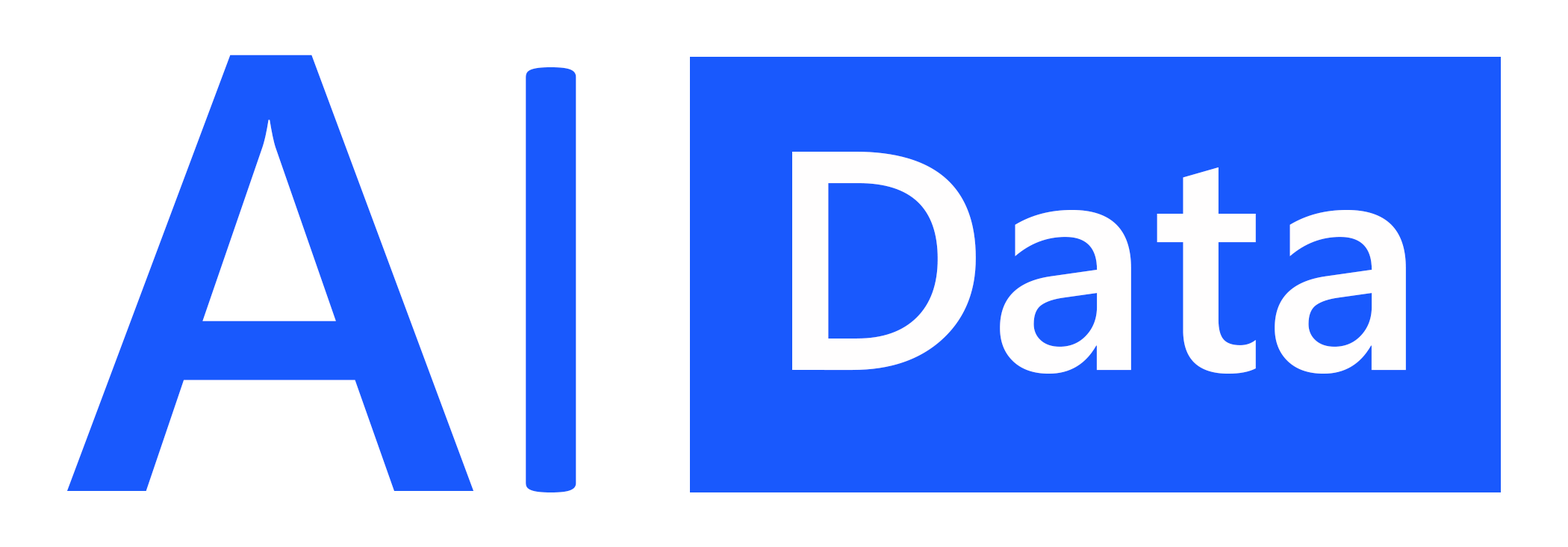
<style>
.page{position:relative;width:1568px;height:547px;background:#ffffff}
.page>*{position:absolute;margin:0}
.t1{font:622.2px "SegoeUI-Semibold";color:#1959fd}
.t2{font:622.2px "Calibri";color:#1959fd}
.t3{font:311.1px "SegoeUI-Semibold";color:#fffefe}
</style>
<div class="page">
<p class="t1" style="left:66px;top:55px;width:510px;height:437px">A<span class="t2">l</span></p>
<p class="t3" style="left:792px;top:152px;width:614px;height:221px">Data</p>
</div>
